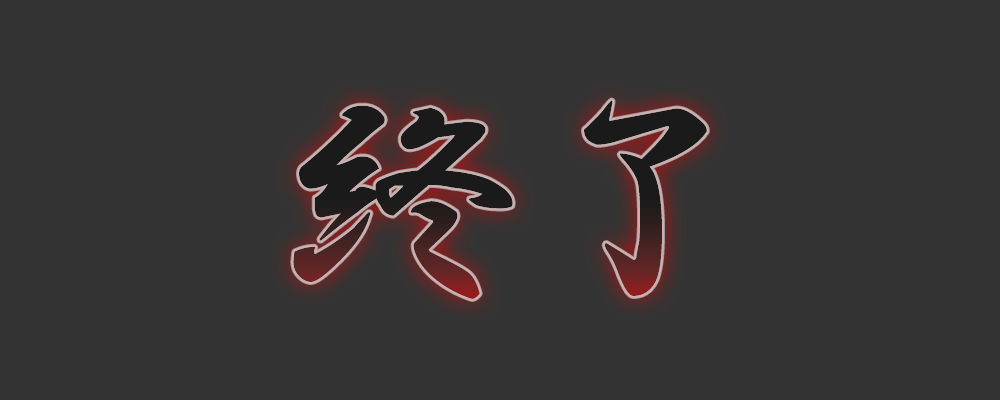
<style>
.page{position:relative;width:1000px;height:400px;background:#333333}
.page>*{position:absolute;margin:0}
.t1{font:238.9px "HGSGyoshotai";color:#1a1a1a;font-weight:bold}
</style>
<div class="page">
<p class="t1" style="left:293px;top:100px;width:414px;height:199px">終了</p>
</div>
